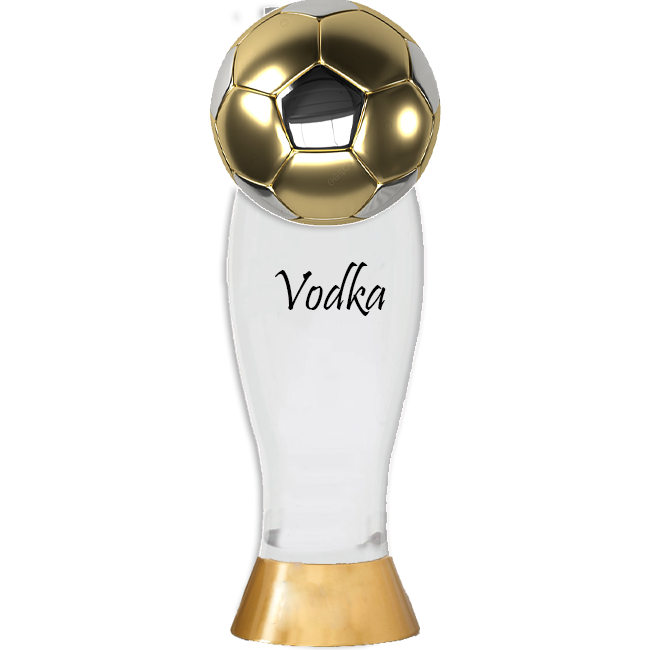
<style>
.page{position:relative;width:650px;height:650px;background:#ffffff}
.page>*{position:absolute;margin:0}
.t1{font:57.8px "Pristina-Regular";color:#000000;scale:0.92 1}
</style>
<div class="page">
<p class="t1" style="left:275px;top:262px;width:111px;height:54px">Vodka</p>
</div>
